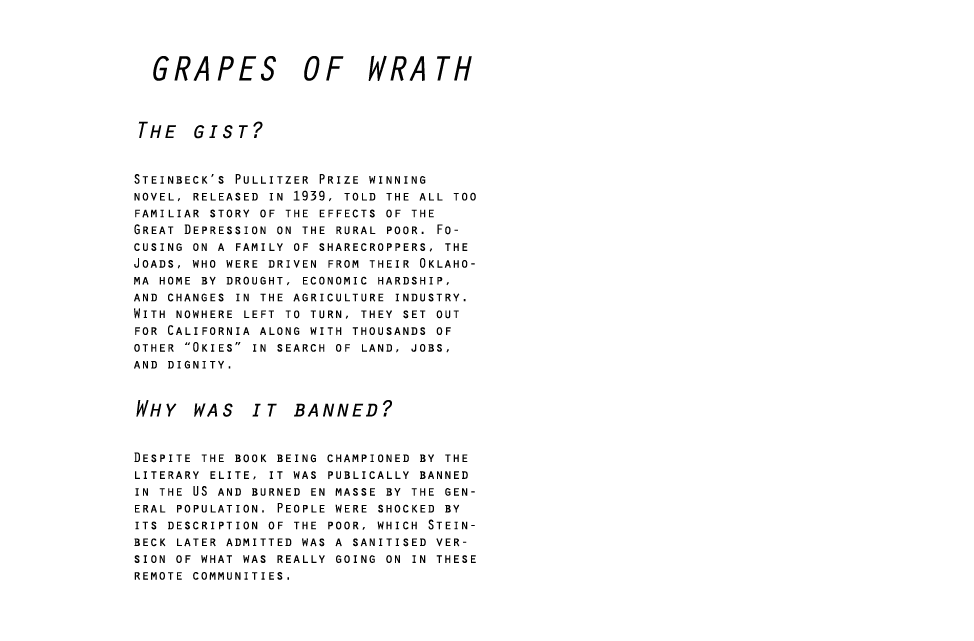
<style>
.page{position:relative;width:974px;height:641px;background:#ffffff}
.page>*{position:absolute;margin:0}
.t1{font:14px "OratorStd";color:#010101}
.t2{font:36px "OratorStd-Slanted";color:#010101}
.t3{font:24px "OratorStd-Slanted";color:#010101}
</style>
<div class="page">
<p class="t1" style="left:134px;top:55px;width:342px;height:525px;text-align:center"><span class="t2">GRAPES OF WRATH<br></span><span class="t3"><br>The gist?<br><br></span>Steinbeck’s Pullitzer Prize winning novel, released in 1939, told the all too familiar story of the effects of the Great Depression on the rural poor. Focusing on a family of sharecroppers, the Joads, who were driven from their Oklahoma home by drought, economic hardship, and changes in the agriculture industry. With nowhere left to turn, they set out for California along with thousands of other “Okies” in search of land, jobs, and dignity.<br><br><span class="t3">Why was it banned?<br><br></span>Despite the book being championed by the literary elite, it was publically banned in the US and burned en masse by the general population. People were shocked by its description of the poor, which Steinbeck later admitted was a sanitised version of what was really going on in these remote communities.</p>
</div>
